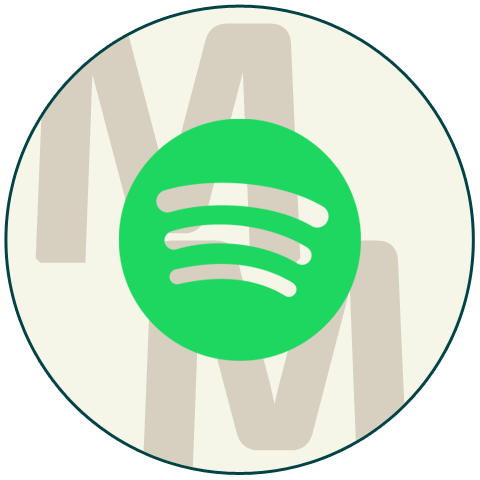
<style>
.page{position:relative;width:480px;height:480px;background:#f5f5e8}
.page>*{position:absolute;margin:0}
.t1{font:333.3px "Exo2-SemiBold";letter-spacing:-0.05em;font-weight:bold}
</style>
<div class="page">
<p class="t1" style="left:35px;top:23px;width:266px;height:240px">M</p>
<p class="t1" style="left:142px;top:240px;width:266px;height:240px">M</p>
</div>
